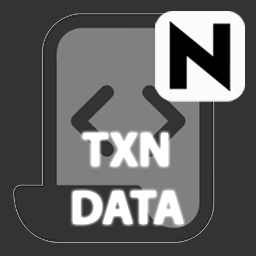
<style>
.page{position:relative;width:256px;height:256px;background:#333333}
.page>*{position:absolute;margin:0}
.t1{font:48px "MyriadPro-Bold";color:#ffffff}
</style>
<div class="page">
<p class="t1" style="left:73px;top:133px;width:111px;height:91px;text-align:center">TXN<br>DATA</p>
</div>
